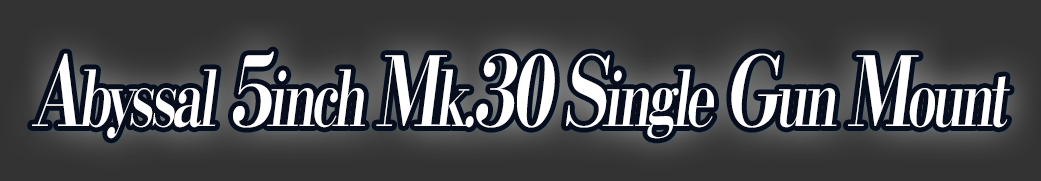
<style>
.page{position:relative;width:1041px;height:181px;background:#333333}
.page>*{position:absolute;margin:0}
.t1{font:76.8px "KochoStd-Heavy";letter-spacing:-0.08em;color:#ffffff;font-style:italic;scale:0.71 1}
.t2{font:96px "KochoStd-Heavy";letter-spacing:-0.08em;color:#ffffff;font-style:italic;scale:0.71 1}
</style>
<div class="page">
<p class="t1" style="left:32px;top:51px;width:978px;height:88px"><span class="t2">A</span>byssal<span class="t2"> 5</span>inch <span class="t2">M</span>k.<span class="t2">30 S</span>ingle <span class="t2">G</span>un <span class="t2">M</span>ount</p>
</div>
